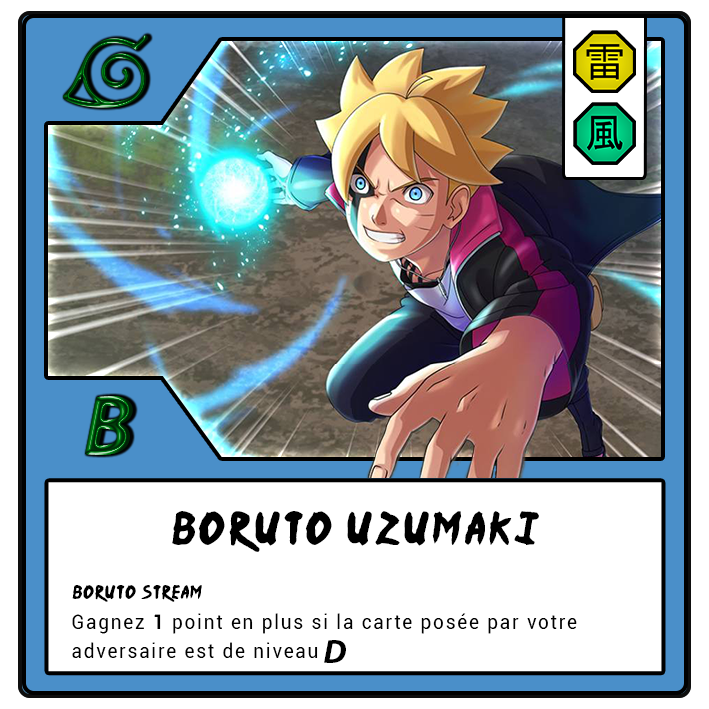
<style>
.page{position:relative;width:709px;height:709px;background:#ffffff}
.page>*{position:absolute;margin:0}
.t1{font:87.5px "MyriadPro-BoldIt";letter-spacing:-0.12em}
.t2{font:37.5px "Ninja-Naruto";letter-spacing:0.1em;color:#000000}
.t3{font:15.4px "Ninja-Naruto";letter-spacing:0.07em;color:#000000}
.t4{font:20.8px/29.2px "Roboto-Regular";letter-spacing:0.1em;color:#000000;scale:0.9 1}
.t5{font:20.8px/29.2px "Roboto-Bold";letter-spacing:0.1em;color:#000000;scale:0.9 1}
.t6{font:33.6px "MyriadPro-BoldIt";letter-spacing:-0.12em;color:#000000}
</style>
<div class="page">
<p class="t1" style="left:85px;top:396px;width:48px;height:59px">B</p>
<p class="t2" style="left:172px;top:511px;width:367px;height:41px">Boruto Uzumaki</p>
<p class="t3" style="left:72px;top:585px;width:130px;height:17px">Boruto Stream</p>
<p class="t4" style="left:72px;top:613px;width:505px;height:45px">Gagnez <span class="t5">1</span> point en plus si la carte posée par votre <br>adversaire est de niveau</p>
<p class="t6" style="left:324px;top:640px;width:22px;height:23px">D</p>
</div>
